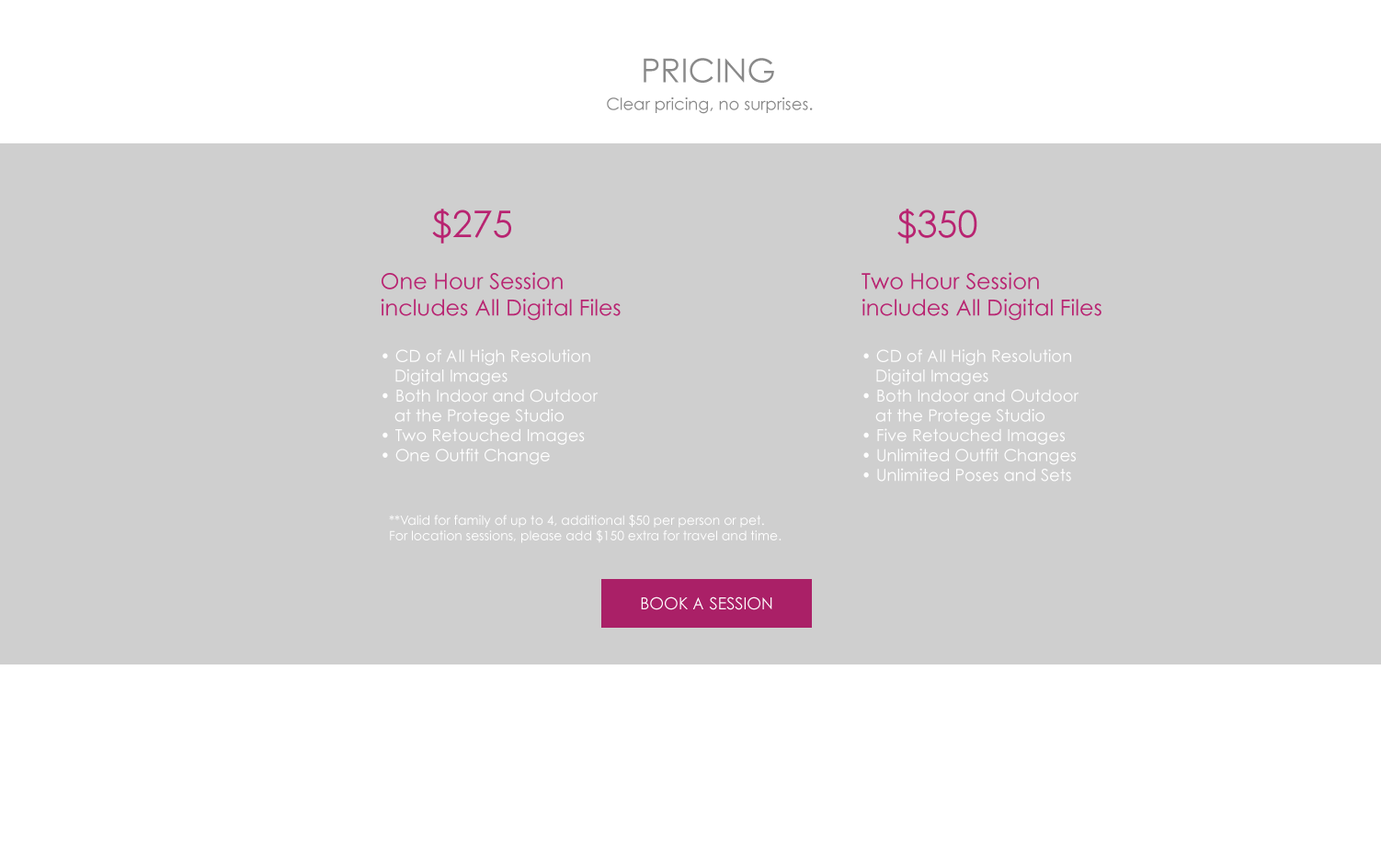
<style>
.page{position:relative;width:1381px;height:863px;background:#cfcfcf}
.page>*{position:absolute;margin:0}
.t1{font:33.1px "CenturyGothic";color:#898989}
.t2{font:16.6px "CenturyGothic";color:#898989}
.t3{font:36.8px "CenturyGothic";color:#b82471}
.t4{font:16.6px "CenturyGothic";color:#ffffff}
.t5{font:22.1px "CenturyGothic";color:#b82471}
.t6{font:12.9px "CenturyGothic";color:#ffffff}
</style>
<div class="page">
<p class="t1" style="left:644px;top:58px;width:130px;height:25px">PRICING</p>
<p class="t2" style="left:607px;top:97px;width:206px;height:17px">Clear pricing, no surprises.</p>
<p class="t3" style="left:432px;top:209px;width:79px;height:35px">$275</p>
<p class="t3" style="left:897px;top:209px;width:80px;height:35px">$350</p>
<p class="t4" style="left:381px;top:272px;width:240px;height:193px"><span class="t5">One Hour Session<br>includes All Digital Files<br><br></span>• CD of All High Resolution <br>   Digital Images<br>• Both Indoor and Outdoor<br>   at the Protege Studio<br>• Two Retouched Images<br>• One Outfit Change</p>
<p class="t4" style="left:862px;top:272px;width:240px;height:210px"><span class="t5">Two Hour Session<br>includes All Digital Files<br><br></span>• CD of All High Resolution<br>   Digital Images<br>• Both Indoor and Outdoor<br>   at the Protege Studio<br>• Five Retouched Images<br>• Unlimited Outfit Changes<br>• Unlimited Poses and Sets</p>
<p class="t6" style="left:389px;top:515px;width:393px;height:28px">**Valid for family of up to 4, additional $50 per person or pet. <br>For location sessions, please add $150 extra for travel and time.</p>
</div>
